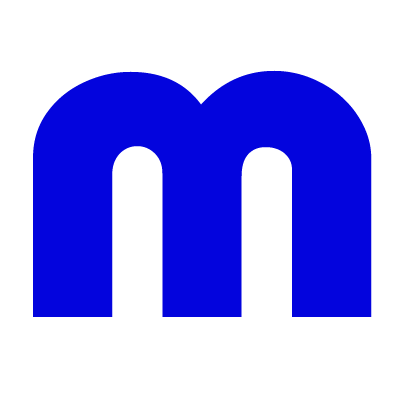
<style>
.page{position:relative;width:400px;height:400px;background:#ffffff}
.page>*{position:absolute;margin:0}
.t1{font:493.4px "NVTBahamasHeavyBold";color:#0304dd}
</style>
<div class="page">
<p class="t1" style="left:33px;top:70px;width:339px;height:247px">m</p>
</div>
